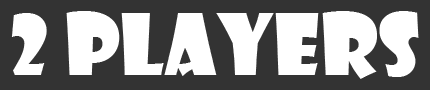
<style>
.page{position:relative;width:430px;height:90px;background:#333333}
.page>*{position:absolute;margin:0}
.t1{font:83.3px "ShowcardGothic-Reg";color:#ffffff}
</style>
<div class="page">
<p class="t1" style="left:11px;top:11px;width:408px;height:68px">2 players</p>
</div>
